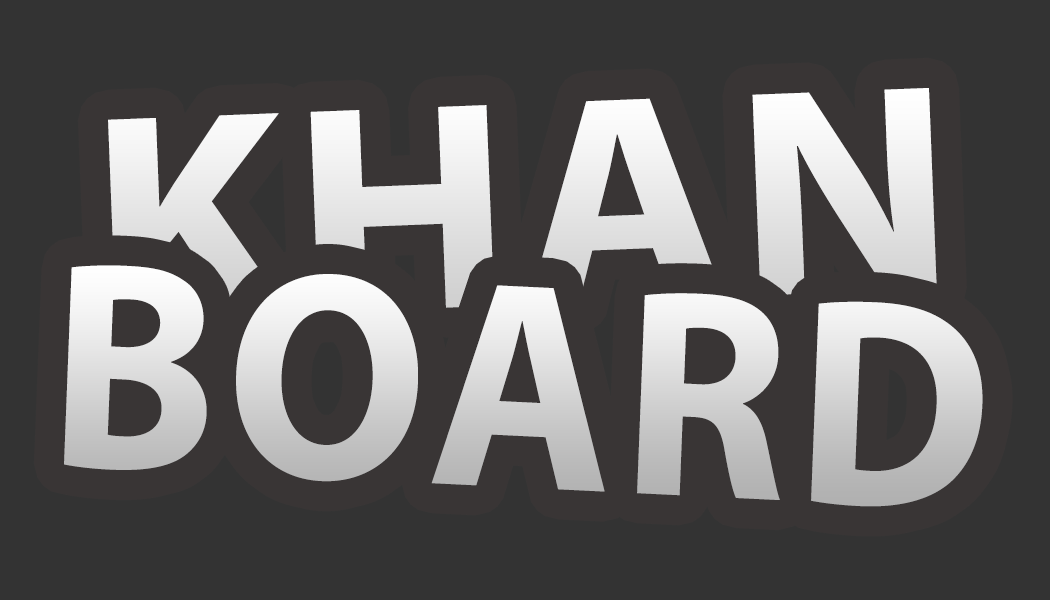
<style>
.page{position:relative;width:1050px;height:600px;background:#333333}
.page>*{position:absolute;margin:0}
.t1{font:416.7px "MyriadArabic-Bold";letter-spacing:0.02em;color:#e8e8e8;scale:1.06 1}
.t2{font:416.5px "MyriadArabic-Bold";letter-spacing:0.02em;scale:0.94 1}
</style>
<div class="page">
<p class="t1" style="left:108px;top:88px;width:829px;height:233px;rotate:-2deg">KHAN</p>
<p class="t2" style="left:64px;top:265px;width:919px;height:242px;rotate:3deg">BOARD</p>
</div>
